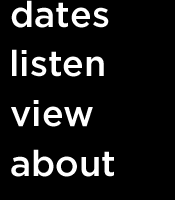
<style>
.page{position:relative;width:175px;height:200px;background:#000000}
.page>*{position:absolute;margin:0}
.t1{font:36px "GothamHTF-Medium";color:#ffffff}
</style>
<div class="page">
<p class="t1" style="left:11px;top:0px;width:98px;height:28px">dates</p>
<p class="t1" style="left:12px;top:49px;width:92px;height:28px">listen</p>
<p class="t1" style="left:11px;top:100px;width:82px;height:27px">view</p>
<p class="t1" style="left:11px;top:149px;width:103px;height:28px">about</p>
</div>
